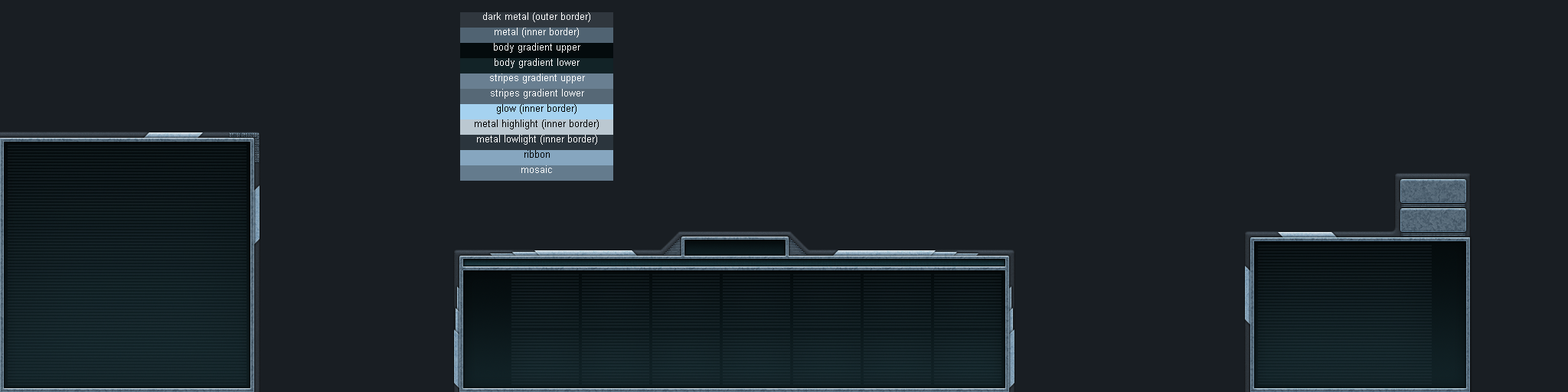
<style>
.page{position:relative;width:1568px;height:392px;background:#191e23}
.page>*{position:absolute;margin:0}
.t1{font:10.2px "ArialMT";color:#ffffff}
.t2{font:10.2px "ArialMT";color:#010101}
.t3{font:10.2px "ArialMT";color:#000000}
</style>
<div class="page">
<p class="t1" style="left:483px;top:12px;width:107px;height:10px">dark metal (outer border)</p>
<p class="t1" style="left:495px;top:28px;width:84px;height:10px">metal (inner border)</p>
<p class="t1" style="left:494px;top:43px;width:86px;height:10px">body gradient upper</p>
<p class="t1" style="left:495px;top:58px;width:85px;height:10px">body gradient lower</p>
<p class="t1" style="left:490px;top:74px;width:95px;height:9px">stripes gradient upper</p>
<p class="t1" style="left:491px;top:89px;width:93px;height:10px">stripes gradient lower</p>
<p class="t2" style="left:497px;top:104px;width:80px;height:10px">glow (inner border)</p>
<p class="t3" style="left:475px;top:119px;width:124px;height:10px">metal highlight (inner border)</p>
<p class="t1" style="left:477px;top:135px;width:120px;height:10px">metal lowlight (inner border)</p>
<p class="t3" style="left:524px;top:150px;width:26px;height:8px">ribbon</p>
<p class="t1" style="left:521px;top:165px;width:31px;height:8px">mosaic</p>
</div>
